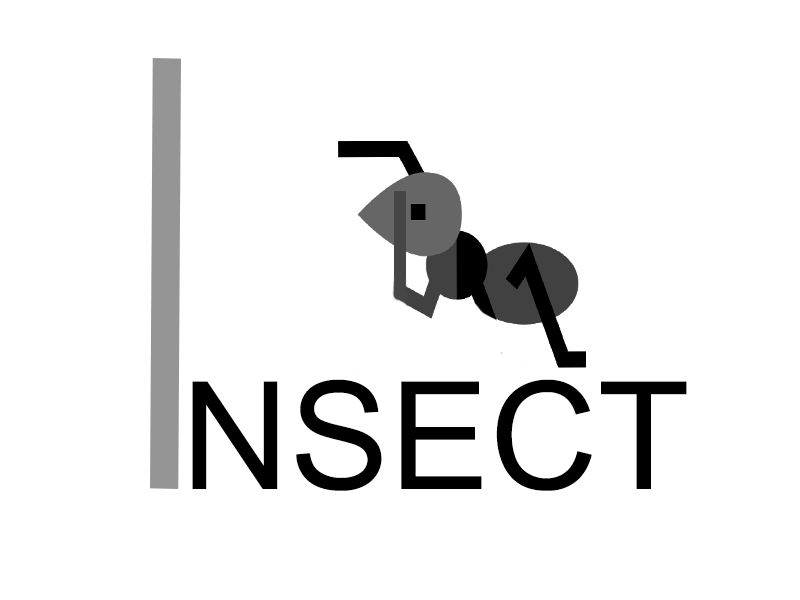
<style>
.page{position:relative;width:800px;height:600px;background:#ffffff}
.page>*{position:absolute;margin:0}
.t1{font:150px "ArialMT";color:#000000}
</style>
<div class="page">
<p class="t1" style="left:192px;top:379px;width:495px;height:112px">NSECT</p>
</div>
